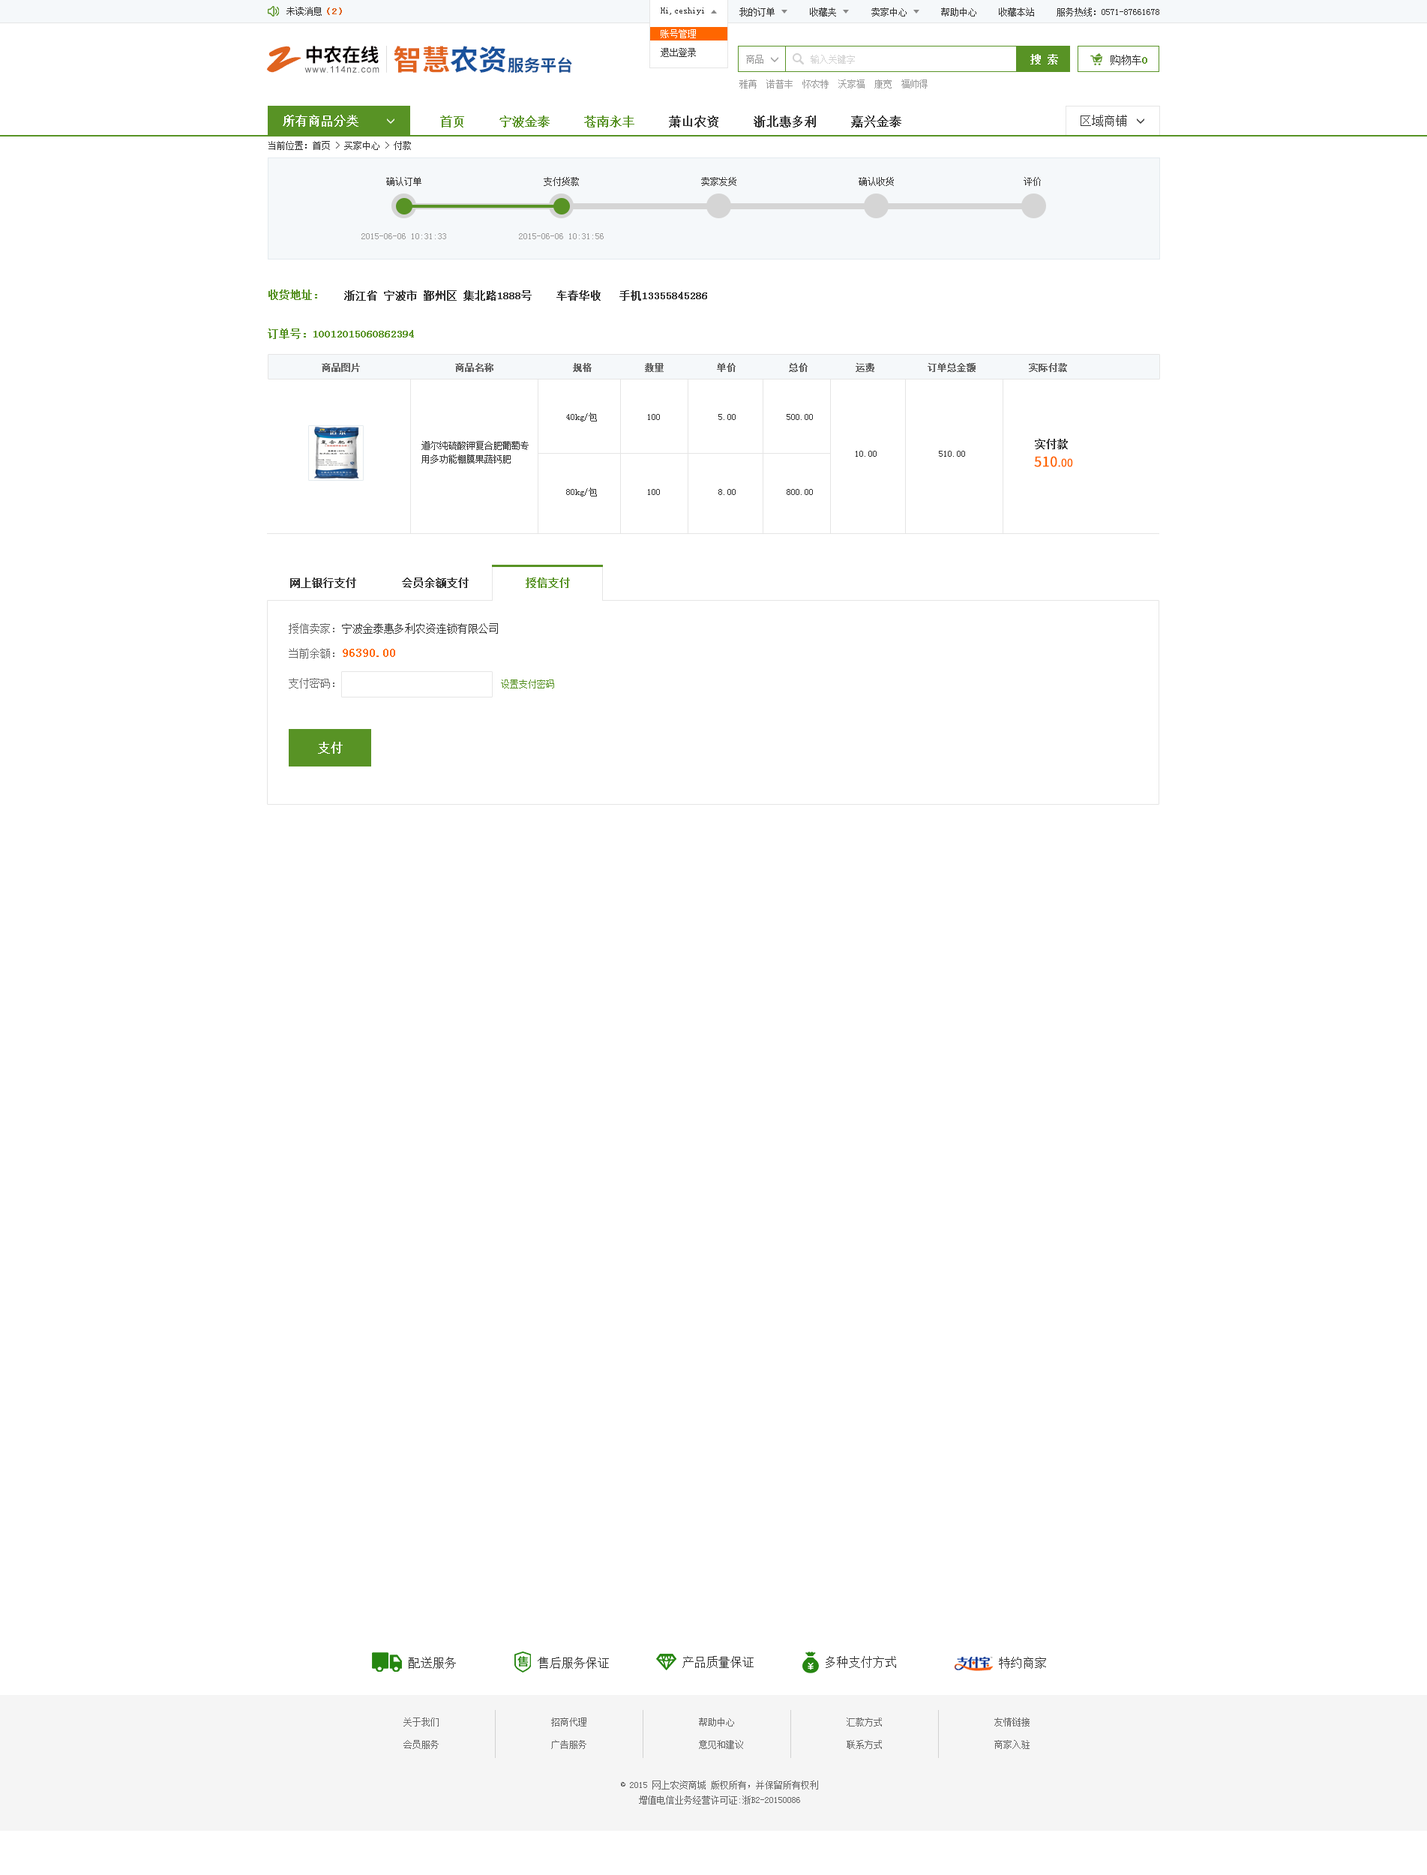
<style>
.page{position:relative;width:1427px;height:1875px;background:#ffffff}
.page>*{position:absolute;margin:0}
.t1{font:9px "SimSun";color:#333333}
.t2{font:9px "SimSun";color:#e0631f;font-weight:bold}
.t3{font:9px/18.8px "SimSun";color:#ffffff}
.t4{font:9px/18.8px "SimSun";color:#333333}
.t5{font:38px "SmudgerLetPlain";color:#e0631f}
.t6{font:18.6px "SourceHanSansCN-Bold";color:#060001}
.t7{font:28.4px "SourceHanSansCN-Bold";color:#e0631f}
.t8{font:28.4px "SourceHanSansCN-Bold";color:#1a529c}
.t9{font:10.5px "SimSun";color:#ffffff;font-weight:bold}
.t10{font:16.3px "SourceHanSansCN-Bold";color:#194f93}
.t11{font:9px "SimSun";color:#999999}
.t12{font:9px "SimSun";color:#d1d1d1}
.t13{font:10.5px "SimSun";color:#333333}
.t14{font:10.5px "SimSun";color:#589325;font-weight:bold}
.t15{font:8.9px "ArialMT";letter-spacing:0.1em;color:#585859}
.t16{font:12px "SimSun";color:#ffffff;font-weight:bold}
.t17{font:12px "SimSun";color:#333333;font-weight:bold}
.t18{font:12px "SimSun";color:#589325;font-weight:bold}
.t19{font:12px "SimSun";color:#333333}
.t20{font:10.5px "SimSun";color:#333333;font-weight:bold}
.t21{font:9px "SimSun";color:#666666;font-weight:bold}
.t22{font:9px/13.5px "SimSun";color:#333333}
.t23{font:13.5px "SourceHanSansCN-Regular";color:#ff6600;font-weight:bold}
.t24{font:10.5px "SourceHanSansCN-Regular";color:#ff6600;font-weight:bold}
.t25{font:10.5px "SimSun";color:#666666}
.t26{font:12px "SimSun";color:#ff6600;font-weight:bold}
.t27{font:9px "SimSun";color:#589325}
.t28{font:9px/22.5px "SimSun";color:#666666}
.t29{font:9px/15px "SimSun";color:#666666}
</style>
<div class="page">
<p class="t1" style="left:286px;top:7px;width:56px;height:9px">未读消息<span class="t2">（2）</span></p>
<p class="t1" style="left:661px;top:8px;width:43px;height:7px">Hi,ceshiyi</p>
<p class="t1" style="left:661px;top:8px;width:43px;height:7px">Hi,ceshiyi</p>
<p class="t1" style="left:740px;top:8px;width:35px;height:8px">我的订单</p>
<p class="t1" style="left:810px;top:8px;width:26px;height:8px">收藏夹</p>
<p class="t1" style="left:872px;top:8px;width:35px;height:8px">卖家中心</p>
<p class="t1" style="left:941px;top:8px;width:35px;height:8px">帮助中心</p>
<p class="t1" style="left:999px;top:8px;width:35px;height:8px">收藏本站</p>
<p class="t1" style="left:1057px;top:8px;width:103px;height:8px">服务热线：0571-87661678</p>
<p class="t3" style="left:661px;top:29px;width:35px;height:28px">账号管理<br><span class="t4">退出登录</span></p>
<p class="t5" style="left:267px;top:46px;width:35px;height:27px">Z</p>
<p class="t6" style="left:306px;top:46px;width:73px;height:18px">中农在线</p>
<p class="t7" style="left:394px;top:46px;width:112px;height:27px">智慧<span class="t8">农资</span></p>
<p class="t9" style="left:1030px;top:54px;width:28px;height:10px">搜 索</p>
<p class="t10" style="left:508px;top:57px;width:64px;height:16px">服务平台</p>
<p class="t11" style="left:746px;top:55px;width:18px;height:9px">商品</p>
<p class="t12" style="left:811px;top:55px;width:44px;height:9px">输入关键字</p>
<p class="t13" style="left:1111px;top:55px;width:37px;height:10px">购物车<span class="t14">0</span></p>
<p class="t15" style="left:304px;top:66px;width:76px;height:7px">www.114nz.com</p>
<p class="t11" style="left:740px;top:80px;width:188px;height:8px">雅苒  诺普丰  怀农特  沃家福  康宽  福帅得</p>
<p class="t16" style="left:283px;top:115px;width:75px;height:12px">所有商品分类</p>
<p class="t17" style="left:440px;top:116px;width:462px;height:12px"><span class="t18">首页     宁波金泰     苍南永丰    </span> 萧山农资     浙北惠多利     嘉兴金泰</p>
<p class="t19" style="left:1081px;top:115px;width:46px;height:12px">区域商铺</p>
<p class="t1" style="left:268px;top:141px;width:143px;height:9px">当前位置：首页 &gt; 买家中心 &gt; 付款</p>
<p class="t1" style="left:386px;top:177px;width:36px;height:9px">确认订单</p>
<p class="t1" style="left:544px;top:177px;width:35px;height:9px">支付货款</p>
<p class="t1" style="left:701px;top:177px;width:35px;height:9px">卖家发货</p>
<p class="t1" style="left:859px;top:177px;width:35px;height:9px">确认收货</p>
<p class="t1" style="left:1024px;top:177px;width:17px;height:9px">评价</p>
<p class="t11" style="left:362px;top:233px;width:84px;height:6px">2015-06-06 10:31:33</p>
<p class="t11" style="left:519px;top:233px;width:85px;height:6px">2015-06-06 10:31:56</p>
<p class="t14" style="left:268px;top:290px;width:49px;height:10px">收货地址：</p>
<p class="t20" style="left:344px;top:290px;width:363px;height:11px">浙江省 宁波市 鄞州区 集北路1888号    车春华收   手机13355845286</p>
<p class="t14" style="left:268px;top:328px;width:146px;height:11px">订单号：10012015060862394</p>
<p class="t21" style="left:322px;top:363px;width:745px;height:9px">商品图片                  商品名称               规格          数量          单价          总价         运费          订单总金额          实际付款</p>
<p class="t1" style="left:566px;top:412px;width:31px;height:10px">40kg/包</p>
<p class="t1" style="left:648px;top:414px;width:12px;height:6px">100</p>
<p class="t1" style="left:718px;top:414px;width:18px;height:6px">5.00</p>
<p class="t1" style="left:787px;top:414px;width:26px;height:6px">500.00</p>
<p class="t22" style="left:422px;top:441px;width:107px;height:23px">道尔纯硫酸钾复合肥葡萄专<br>用多功能棚膜果蔬钙肥</p>
<p class="t20" style="left:1035px;top:439px;width:33px;height:10px">实付款</p>
<p class="t1" style="left:856px;top:451px;width:21px;height:6px">10.00</p>
<p class="t1" style="left:939px;top:451px;width:26px;height:6px">510.00</p>
<p class="t23" style="left:1034px;top:456px;width:39px;height:11px">510<span class="t24">.00</span></p>
<p class="t1" style="left:566px;top:488px;width:31px;height:8px">80kg/包</p>
<p class="t1" style="left:648px;top:489px;width:12px;height:6px">100</p>
<p class="t1" style="left:718px;top:489px;width:18px;height:6px">8.00</p>
<p class="t1" style="left:787px;top:489px;width:26px;height:6px">800.00</p>
<p class="t20" style="left:290px;top:578px;width:66px;height:10px">网上银行支付</p>
<p class="t20" style="left:402px;top:578px;width:67px;height:10px">会员余额支付</p>
<p class="t14" style="left:526px;top:578px;width:44px;height:10px">授信支付</p>
<p class="t25" style="left:289px;top:623px;width:45px;height:11px">授信卖家：</p>
<p class="t13" style="left:342px;top:623px;width:156px;height:11px">宁波金泰惠多利农资连锁有限公司</p>
<p class="t25" style="left:289px;top:648px;width:45px;height:10px">当前余额：</p>
<p class="t26" style="left:343px;top:649px;width:52px;height:8px">96390.00</p>
<p class="t25" style="left:289px;top:678px;width:45px;height:10px">支付密码：</p>
<p class="t27" style="left:501px;top:680px;width:53px;height:8px">设置支付密码</p>
<p class="t16" style="left:318px;top:742px;width:25px;height:12px">支付</p>
<p class="t19" style="left:409px;top:1657px;width:47px;height:12px">配送服务</p>
<p class="t19" style="left:538px;top:1657px;width:71px;height:12px">售后服务保证</p>
<p class="t19" style="left:682px;top:1656px;width:72px;height:12px">产品质量保证</p>
<p class="t19" style="left:826px;top:1656px;width:70px;height:12px">多种支付方式</p>
<p class="t19" style="left:999px;top:1657px;width:47px;height:12px">特约商家</p>
<p class="t28" style="left:404px;top:1718px;width:35px;height:31px">关于我们<br>会员服务</p>
<p class="t28" style="left:551px;top:1718px;width:35px;height:31px">招商代理<br>广告服务</p>
<p class="t28" style="left:699px;top:1718px;width:44px;height:31px">帮助中心<br>意见和建议</p>
<p class="t28" style="left:847px;top:1718px;width:35px;height:31px">汇款方式<br>联系方式</p>
<p class="t28" style="left:994px;top:1718px;width:36px;height:31px">友情链接<br>商家入驻</p>
<p class="t29" style="left:621px;top:1780px;width:197px;height:24px;text-align:center">© 2015 网上农资商城 版权所有，并保留所有权利<br>增值电信业务经营许可证:浙B2-20150086</p>
</div>
